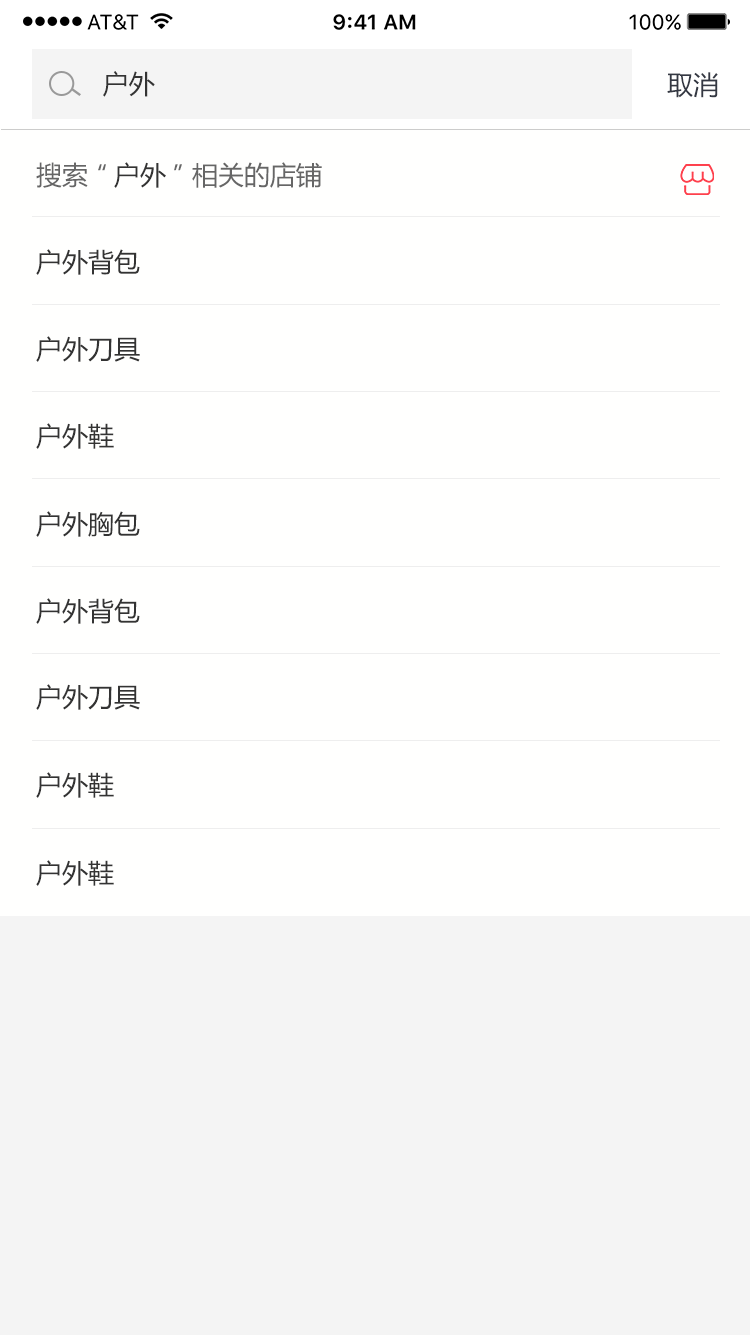
<style>
.page{position:relative;width:750px;height:1335px;background:#fffffe}
.page>*{position:absolute;margin:0}
.t1{font:26px "MicrosoftYaHei";color:#333333}
.t2{font:26px "MicrosoftYaHei";color:#343843}
.t3{font:26px "MicrosoftYaHei";color:#666666}
</style>
<div class="page">
<p class="t1" style="left:103px;top:71px;width:52px;height:26px">户外</p>
<p class="t2" style="left:667px;top:72px;width:51px;height:26px">取消</p>
<p class="t3" style="left:36px;top:162px;width:286px;height:26px">搜索“<span class="t1">户外</span>”相关的店铺</p>
<p class="t1" style="left:36px;top:249px;width:104px;height:26px">户外背包</p>
<p class="t1" style="left:36px;top:336px;width:104px;height:26px">户外刀具</p>
<p class="t1" style="left:36px;top:423px;width:78px;height:26px">户外鞋</p>
<p class="t1" style="left:36px;top:511px;width:104px;height:26px">户外胸包</p>
<p class="t1" style="left:36px;top:598px;width:104px;height:26px">户外背包</p>
<p class="t1" style="left:36px;top:684px;width:104px;height:26px">户外刀具</p>
<p class="t1" style="left:36px;top:772px;width:78px;height:26px">户外鞋</p>
<p class="t1" style="left:36px;top:860px;width:78px;height:26px">户外鞋</p>
</div>
